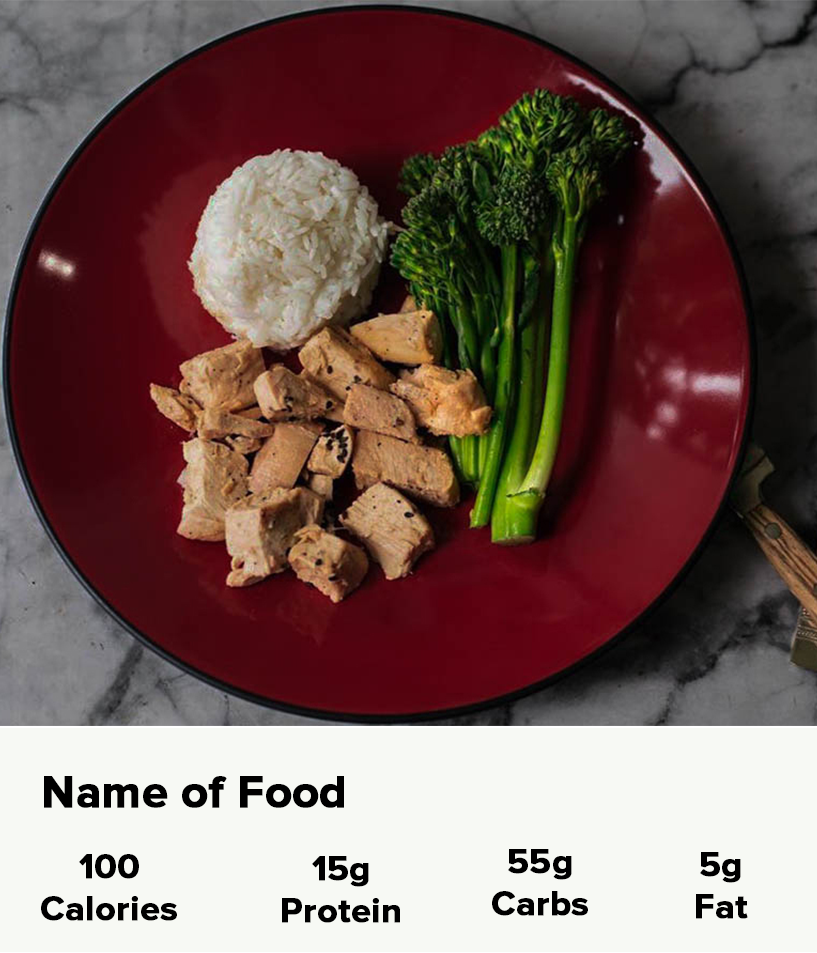
<style>
.page{position:relative;width:817px;height:953px;background:#f7f9f4}
.page>*{position:absolute;margin:0}
.t1{font:45.6px "ProximaNova-Bold";color:#000000;font-weight:bold}
.t2{font:34.9px "ProximaNova-Bold";color:#000000;font-weight:bold}
.t3{font:34.9px "ProximaNova-Bold";color:#c63f55;font-weight:bold}
</style>
<div class="page">
<p class="t1" style="left:44px;top:776px;width:300px;height:32px">Name of Food</p>
<p class="t2" style="left:41px;top:854px;width:136px;height:67px;text-align:center"><span class="t3"><br><br></span>100<br>Calories</p>
<p class="t2" style="left:282px;top:856px;width:118px;height:67px;text-align:center"><span class="t3"><br><br></span>15g<br>Protein</p>
<p class="t2" style="left:492px;top:849px;width:96px;height:67px;text-align:center"><span class="t3"><br><br></span>55g<br>Carbs</p>
<p class="t2" style="left:696px;top:852px;width:52px;height:67px;text-align:center">5g<br>Fat</p>
</div>
